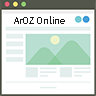
<style>
.page{position:relative;width:96px;height:96px;background:#ffffff}
.page>*{position:absolute;margin:0}
.t1{font:9px "TaipeiSansTCBeta-Regular";color:#1b1b1b}
</style>
<div class="page">
<p class="t1" style="left:14px;top:16px;width:51px;height:8px">ArOZ Online</p>
</div>
